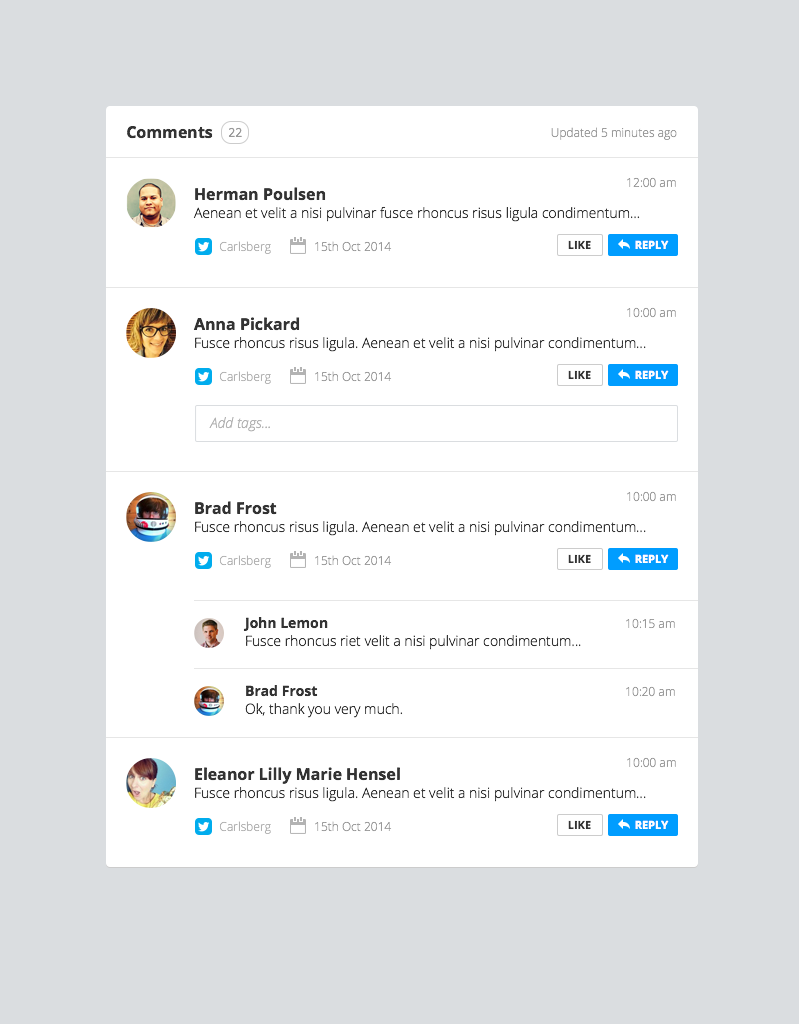
<style>
.page{position:relative;width:799px;height:1024px;background:#ffffff}
.page>*{position:absolute;margin:0}
.t1{font:16px "OpenSans-Bold";color:#333333}
.t2{font:12px "OpenSans";color:#999999;text-transform:uppercase}
.t3{font:12px "OpenSans-Light";color:#999999}
.t4{font:14px/16px "OpenSans-Light";color:#333333}
.t5{font:16px/16px "OpenSans-Bold";color:#333333}
.t6{font:12px "OpenSans-Light";color:#b2b2b2}
.t7{font:11px "OpenSans-Bold";color:#333333;text-transform:uppercase}
.t8{font:11px "OpenSans-Bold";color:#ffffff;text-transform:uppercase}
.t9{font:14px "OpenSansLight-Italic";color:#b3b3b3}
.t10{font:14px/16px "OpenSans-Bold";color:#333333}
</style>
<div class="page">
<p class="t1" style="left:127px;top:126px;width:86px;height:13px">Comments</p>
<p class="t2" style="left:228px;top:127px;width:14px;height:10px">22</p>
<p class="t3" style="left:551px;top:127px;width:126px;height:13px">Updated 5 minutes ago</p>
<p class="t3" style="left:627px;top:177px;width:49px;height:11px">12:00 am</p>
<p class="t4" style="left:193px;top:187px;width:447px;height:35px"><span class="t5">Herman Poulsen<br></span>Aenean et velit a nisi pulvinar fusce rhoncus risus ligula condimentum...</p>
<p class="t6" style="left:219px;top:241px;width:52px;height:13px">Carlsberg</p>
<p class="t3" style="left:315px;top:241px;width:77px;height:11px">15th Oct 2014</p>
<p class="t7" style="left:568px;top:240px;width:23px;height:9px">LIKE</p>
<p class="t8" style="left:635px;top:240px;width:34px;height:9px">REPLY</p>
<p class="t4" style="left:193px;top:317px;width:453px;height:35px"><span class="t5">Anna Pickard<br></span>Fusce rhoncus risus ligula. Aenean et velit a nisi pulvinar condimentum...</p>
<p class="t3" style="left:627px;top:307px;width:49px;height:11px">10:00 am</p>
<p class="t6" style="left:219px;top:371px;width:52px;height:13px">Carlsberg</p>
<p class="t3" style="left:315px;top:371px;width:77px;height:11px">15th Oct 2014</p>
<p class="t7" style="left:568px;top:370px;width:23px;height:9px">LIKE</p>
<p class="t8" style="left:635px;top:370px;width:34px;height:9px">REPLY</p>
<p class="t9" style="left:209px;top:417px;width:61px;height:15px">Add tags...</p>
<p class="t3" style="left:627px;top:491px;width:49px;height:11px">10:00 am</p>
<p class="t4" style="left:195px;top:501px;width:451px;height:35px"><span class="t5">Brad Frost<br></span>Fusce rhoncus risus ligula. Aenean et velit a nisi pulvinar condimentum...</p>
<p class="t6" style="left:219px;top:555px;width:52px;height:13px">Carlsberg</p>
<p class="t3" style="left:315px;top:555px;width:77px;height:11px">15th Oct 2014</p>
<p class="t7" style="left:568px;top:554px;width:23px;height:9px">LIKE</p>
<p class="t8" style="left:635px;top:554px;width:34px;height:9px">REPLY</p>
<p class="t4" style="left:243px;top:617px;width:338px;height:33px"><span class="t10">John Lemon<br></span>Fusce rhoncus riet velit a nisi pulvinar condimentum...</p>
<p class="t3" style="left:626px;top:618px;width:49px;height:11px">10:15 am</p>
<p class="t4" style="left:245px;top:685px;width:158px;height:33px"><span class="t10">Brad Frost<br></span>Ok, thank you very much.</p>
<p class="t3" style="left:626px;top:686px;width:49px;height:11px">10:20 am</p>
<p class="t3" style="left:627px;top:757px;width:49px;height:11px">10:00 am</p>
<p class="t4" style="left:195px;top:767px;width:451px;height:35px"><span class="t5">Eleanor Lilly Marie Hensel<br></span>Fusce rhoncus risus ligula. Aenean et velit a nisi pulvinar condimentum...</p>
<p class="t6" style="left:219px;top:821px;width:52px;height:13px">Carlsberg</p>
<p class="t3" style="left:315px;top:821px;width:77px;height:11px">15th Oct 2014</p>
<p class="t7" style="left:568px;top:820px;width:23px;height:9px">LIKE</p>
<p class="t8" style="left:635px;top:820px;width:34px;height:9px">REPLY</p>
</div>
